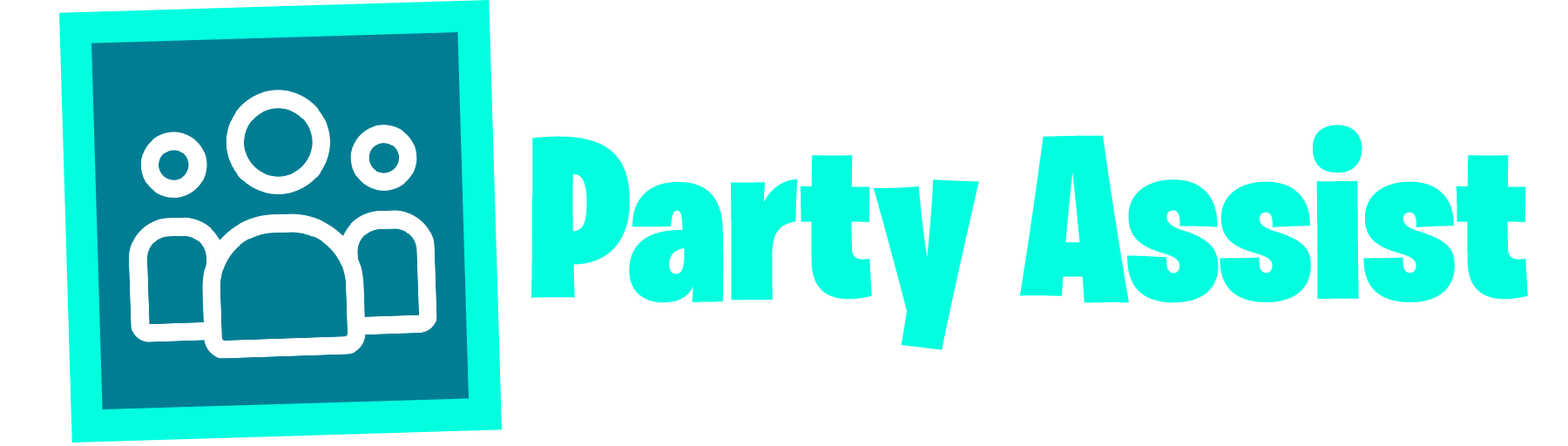
<style>
.page{position:relative;width:1568px;height:446px;background:#ffffff}
.page>*{position:absolute;margin:0}
.t1{font:232.3px "BurbankBigCondensed-Black";color:#01ffdf}
</style>
<div class="page">
<p class="t1" style="left:531px;top:125px;width:997px;height:225px">Party Assist</p>
</div>
